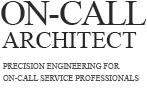
<style>
.page{position:relative;width:147px;height:101px;background:#ffffff}
.page>*{position:absolute;margin:0}
.t1{font:36px "TimesNewRomanPSMT";letter-spacing:-0.05em;color:#2b2b2b;text-transform:uppercase}
.t2{font:24px "TimesNewRomanPSMT";color:#262525;text-transform:uppercase}
.t3{font:8px/12.6px "TimesNewRomanPSMT";color:#4f4f4f;text-transform:uppercase}
</style>
<div class="page">
<p class="t1" style="left:1px;top:1px;width:146px;height:25px">on-call</p>
<p class="t2" style="left:2px;top:32px;width:135px;height:16px">architect</p>
<p class="t3" style="left:3px;top:63px;width:136px;height:18px">Precision Engineering for<br>On-Call Service Professionals</p>
</div>
